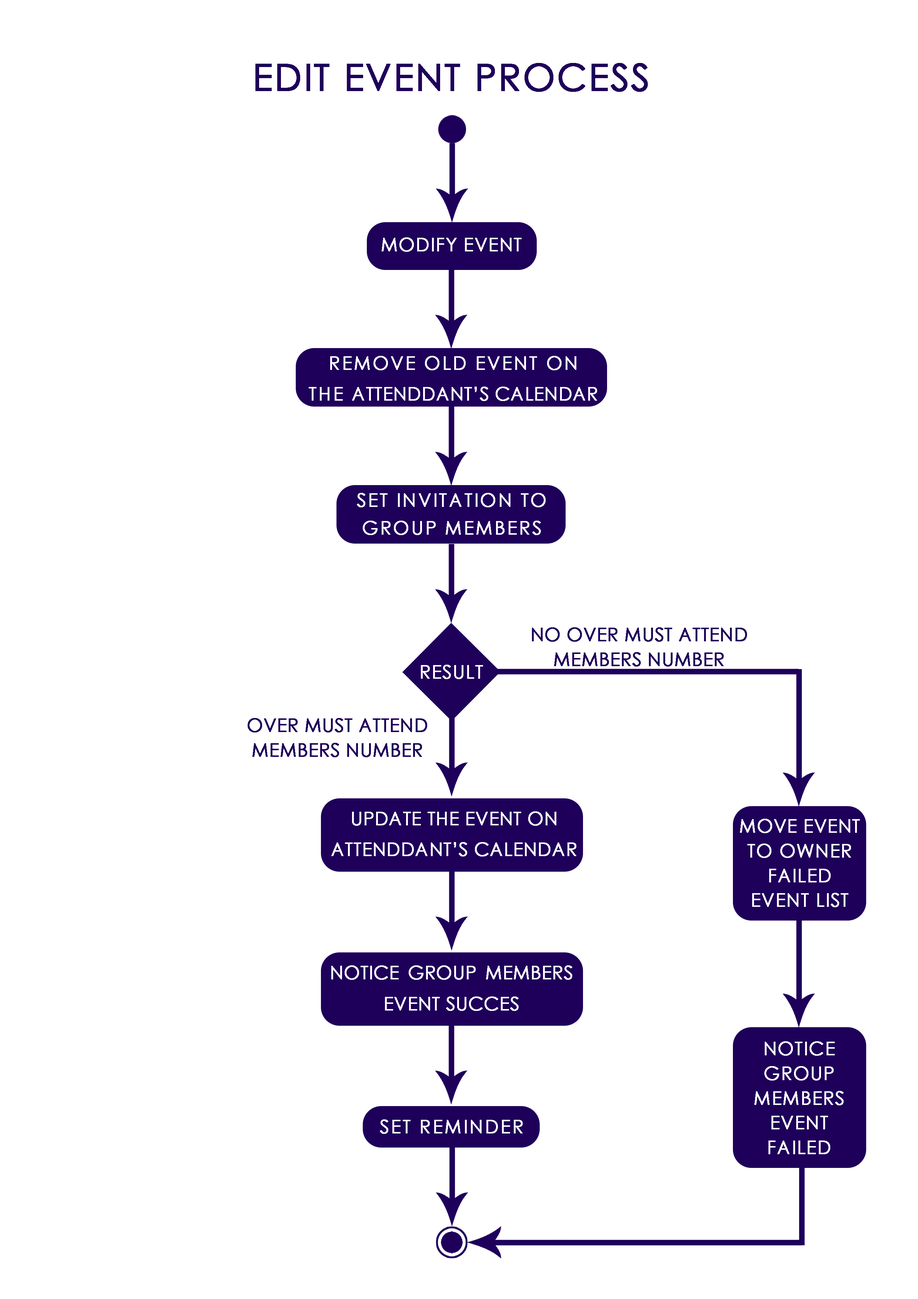
<style>
.page{position:relative;width:918px;height:1299px;background:#ffffff}
.page>*{position:absolute;margin:0}
.t1{font:37px "CenturyGothic";letter-spacing:0.025em;color:#1e005a;text-transform:uppercase;font-weight:bold}
.t2{font:18.5px "CenturyGothic";letter-spacing:0.025em;color:#ffffff;text-transform:uppercase;font-weight:bold}
.t3{font:18.5px/27.8px "CenturyGothic";letter-spacing:0.075em;color:#ffffff;text-transform:uppercase;font-weight:bold}
.t4{font:18.5px/30.8px "CenturyGothic";color:#ffffff;text-transform:uppercase;font-weight:bold}
.t5{font:4.4px/24.7px "CenturyGothic";color:#1e005a;text-transform:uppercase;font-weight:bold}
.t6{font:18.5px/30.9px "CenturyGothic";color:#ffffff;text-transform:uppercase;font-weight:bold}
.t7{font:18.5px/24.7px "CenturyGothic";letter-spacing:0.025em;color:#ffffff;text-transform:uppercase;font-weight:bold}
.t8{font:18.5px/24.7px "CenturyGothic";letter-spacing:0.005em;color:#ffffff;text-transform:uppercase;font-weight:bold}
.t9{font:18.5px "CenturyGothic";letter-spacing:0.075em;color:#ffffff;text-transform:uppercase;font-weight:bold}
</style>
<div class="page">
<p class="t1" style="left:255px;top:63px;width:393px;height:29px">edit event process</p>
<p class="t2" style="left:382px;top:237px;width:140px;height:15px">modify event</p>
<p class="t3" style="left:309px;top:356px;width:288px;height:45px;text-align:center">remove old event on the <span class="t4">attenddant’s calendar</span></p>
<p class="t3" style="left:357px;top:493px;width:189px;height:42px;text-align:center">set invitation to group members</p>
<p class="t5" style="left:532px;top:627px;width:215px;height:39px;text-align:center">no over must attend<br>members number</p>
<p class="t2" style="left:421px;top:665px;width:62px;height:14px">result</p>
<p class="t5" style="left:248px;top:718px;width:179px;height:39px;text-align:center">over must attend<br>members number</p>
<p class="t6" style="left:331px;top:811px;width:245px;height:45px;text-align:justify">update the event on<br>attenddant’s calendar</p>
<p class="t7" style="left:740px;top:819px;width:120px;height:88px;text-align:center"><span class="t8">Move event </span>to owner failed<br>event list</p>
<p class="t6" style="left:331px;top:965px;width:241px;height:46px;text-align:justify">notice group members event succes</p>
<p class="t7" style="left:755px;top:1041px;width:89px;height:113px;text-align:center">notice group members event failed</p>
<p class="t9" style="left:380px;top:1119px;width:143px;height:15px">set reminder</p>
</div>
